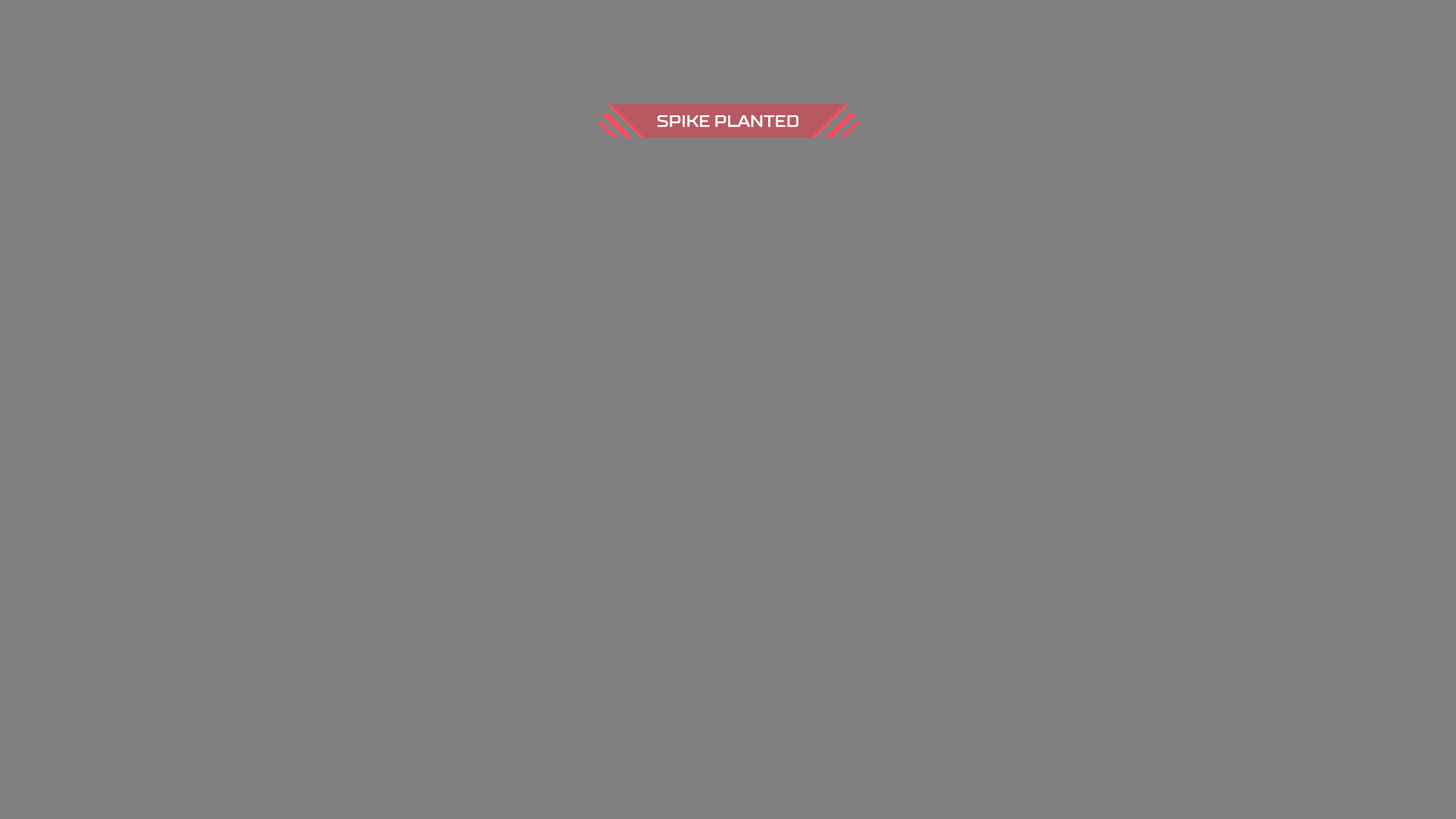
<style>
.page{position:relative;width:1456px;height:819px;background:#808080}
.page>*{position:absolute;margin:0}
.t1{font:16.5px "TTSupermolotNeueExpanded-DmBd";letter-spacing:-0.02em;color:#ffffff;text-transform:uppercase}
</style>
<div class="page">
<p class="t1" style="left:657px;top:115px;width:142px;height:12px">SPIKE PLANTED</p>
</div>
